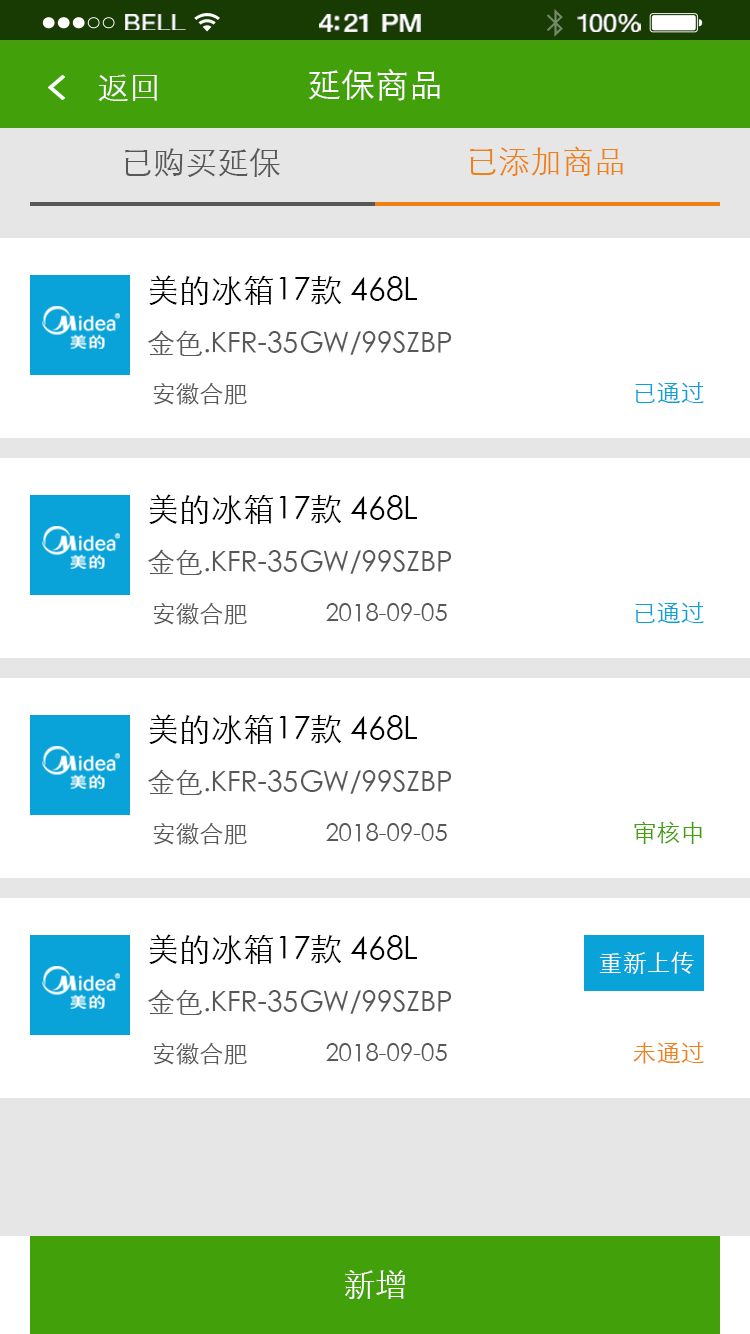
<style>
.page{position:relative;width:750px;height:1334px;background:#ffffff}
.page>*{position:absolute;margin:0}
.t1{font:23.3px "HelveticaNeue";letter-spacing:0.02em;color:#ffffff;scale:1.06 1}
.t2{font:25.3px "HelveticaNeue-Medium";letter-spacing:-0.02em;color:#ffffff;scale:1.06 1}
.t3{font:24.3px "HelveticaNeue";letter-spacing:-0.02em;color:#ffffff;scale:1.06 1}
.t4{font:32px "STXihei";color:#ffffff}
.t5{font:34px "STXihei";color:#ffffff}
.t6{font:32px "STXihei";color:#595757}
.t7{font:32px "STXihei";color:#ef8014}
.t8{font:28px/56px "STXihei";color:#595757}
.t9{font:32px/56px "STXihei";color:#000000}
.t10{font:24px "STXihei";color:#595757}
.t11{font:24px "STXihei";color:#09a3d9}
.t12{font:24px "STXihei";color:#42a00a}
.t13{font:24px "STXihei";color:#ffffff}
.t14{font:24px "STXihei";color:#ef8013}
</style>
<div class="page">
<p class="t1" style="left:125px;top:14px;width:61px;height:16px">BELL</p>
<p class="t2" style="left:319px;top:14px;width:102px;height:18px">4:21 PM</p>
<p class="t3" style="left:577px;top:14px;width:64px;height:18px">100%</p>
<p class="t4" style="left:98px;top:74px;width:59px;height:27px">返回</p>
<p class="t5" style="left:308px;top:69px;width:132px;height:32px">延保商品</p>
<p class="t6" style="left:125px;top:148px;width:155px;height:29px">已购买延保</p>
<p class="t7" style="left:470px;top:146px;width:153px;height:30px">已添加商品</p>
<p class="t8" style="left:148px;top:275px;width:304px;height:81px"><span class="t9">美的冰箱17款 468L <br></span>金色.KFR-35GW/99SZBP</p>
<p class="t10" style="left:153px;top:382px;width:94px;height:23px">安徽合肥</p>
<p class="t11" style="left:635px;top:382px;width:69px;height:21px">已通过</p>
<p class="t8" style="left:148px;top:494px;width:304px;height:81px"><span class="t9">美的冰箱17款 468L <br></span>金色.KFR-35GW/99SZBP</p>
<p class="t10" style="left:153px;top:602px;width:294px;height:23px">安徽合肥             2018-09-05</p>
<p class="t11" style="left:635px;top:602px;width:69px;height:21px">已通过</p>
<p class="t8" style="left:148px;top:714px;width:304px;height:81px"><span class="t9">美的冰箱17款 468L <br></span>金色.KFR-35GW/99SZBP</p>
<p class="t10" style="left:153px;top:822px;width:294px;height:23px">安徽合肥             2018-09-05</p>
<p class="t12" style="left:634px;top:821px;width:68px;height:23px">审核中</p>
<p class="t8" style="left:148px;top:934px;width:304px;height:81px"><span class="t9">美的冰箱17款 468L <br></span>金色.KFR-35GW/99SZBP</p>
<p class="t13" style="left:599px;top:951px;width:95px;height:23px">重新上传</p>
<p class="t10" style="left:153px;top:1042px;width:294px;height:23px">安徽合肥             2018-09-05</p>
<p class="t14" style="left:633px;top:1042px;width:71px;height:22px">未通过</p>
<p class="t4" style="left:345px;top:1270px;width:60px;height:29px">新增</p>
</div>
